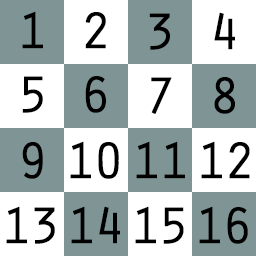
<style>
.page{position:relative;width:256px;height:256px;background:#7f9595}
.page>*{position:absolute;margin:0}
.t1{font:52.8px "OratorStd";letter-spacing:0.01em;color:#000000;font-weight:bold}
.t2{font:52.8px "OratorStd";letter-spacing:-0.1em;color:#000000;font-weight:bold}
</style>
<div class="page">
<p class="t1" style="left:22px;top:11px;width:21px;height:38px">1</p>
<p class="t1" style="left:85px;top:12px;width:21px;height:37px">2</p>
<p class="t1" style="left:149px;top:13px;width:21px;height:37px">3</p>
<p class="t1" style="left:214px;top:12px;width:21px;height:38px">4</p>
<p class="t1" style="left:22px;top:76px;width:21px;height:37px">5</p>
<p class="t1" style="left:85px;top:76px;width:21px;height:37px">6</p>
<p class="t1" style="left:151px;top:77px;width:21px;height:37px">7</p>
<p class="t1" style="left:214px;top:77px;width:21px;height:37px">8</p>
<p class="t1" style="left:22px;top:142px;width:21px;height:37px">9</p>
<p class="t2" style="left:70px;top:141px;width:49px;height:38px">10</p>
<p class="t2" style="left:136px;top:141px;width:49px;height:38px">11</p>
<p class="t2" style="left:201px;top:141px;width:49px;height:38px">12</p>
<p class="t2" style="left:6px;top:206px;width:49px;height:38px">13</p>
<p class="t2" style="left:71px;top:206px;width:49px;height:38px">14</p>
<p class="t2" style="left:135px;top:206px;width:49px;height:38px">15</p>
<p class="t2" style="left:199px;top:206px;width:49px;height:38px">16</p>
</div>
